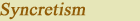
<style>
.page{position:relative;width:140px;height:21px;background:#e6e6b8}
.page>*{position:absolute;margin:0}
.t1{font:18px "TimesNewRomanPSMT";color:#915c07;font-weight:bold;font-style:italic}
</style>
<div class="page">
<p class="t1" style="left:0px;top:2px;width:86px;height:18px">Syncretism</p>
</div>
